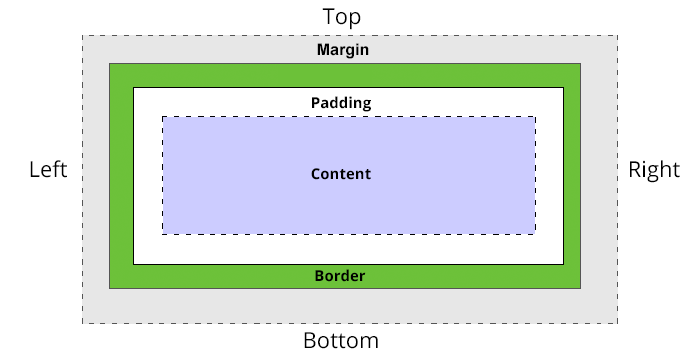
<style>
.page{position:relative;width:700px;height:360px;background:#ffffff}
.page>*{position:absolute;margin:0}
.t1{font:22px "OpenSans";color:#000000}
.t2{font:16px "Arial-BoldMT";color:#000000}
.t3{font:15px "OpenSans-Bold";color:#000000}
</style>
<div class="page">
<p class="t1" style="left:322px;top:8px;width:39px;height:22px">Top</p>
<p class="t2" style="left:317px;top:43px;width:52px;height:16px">Margin</p>
<p class="t3" style="left:312px;top:96px;width:59px;height:16px">Padding</p>
<p class="t1" style="left:30px;top:160px;width:37px;height:18px">Left</p>
<p class="t1" style="left:630px;top:160px;width:50px;height:23px">Right</p>
<p class="t3" style="left:311px;top:168px;width:60px;height:12px">Content</p>
<p class="t3" style="left:315px;top:269px;width:51px;height:13px">Border</p>
<p class="t1" style="left:304px;top:332px;width:74px;height:17px">Bottom</p>
</div>
